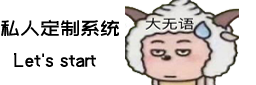
<style>
.page{position:relative;width:256px;height:85px;background:#ffffff}
.page>*{position:absolute;margin:0}
.t1{font:20px "zcoolwenyiti";color:#000000}
</style>
<div class="page">
<p class="t1" style="left:1px;top:19px;width:118px;height:17px">私人定制系统</p>
<p class="t1" style="left:14px;top:53px;width:82px;height:14px">Let's start</p>
</div>
